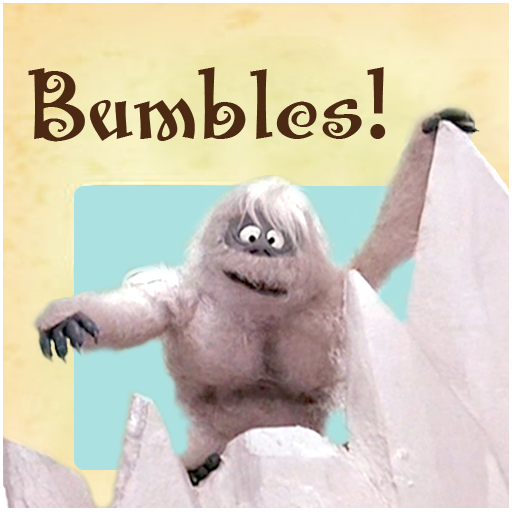
<style>
.page{position:relative;width:512px;height:512px}
.page>*{position:absolute;margin:0}
.t1{font:100px "SantasBigSecretBB";color:#4c2913}
</style>
<div class="page">
<p class="t1" style="left:28px;top:67px;width:358px;height:75px">Bumbles!</p>
</div>
